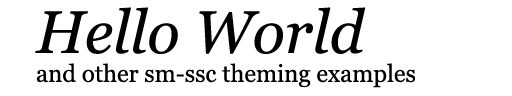
<style>
.page{position:relative;width:512px;height:96px;background:#ffffff}
.page>*{position:absolute;margin:0}
.t1{font:24px "Georgia";color:#000000}
.t2{font:60px "Georgia-Italic";color:#000000}
</style>
<div class="page">
<p class="t1" style="left:35px;top:7px;width:380px;height:81px"><span class="t2">Hello World<br></span>and other sm-ssc theming examples</p>
</div>
